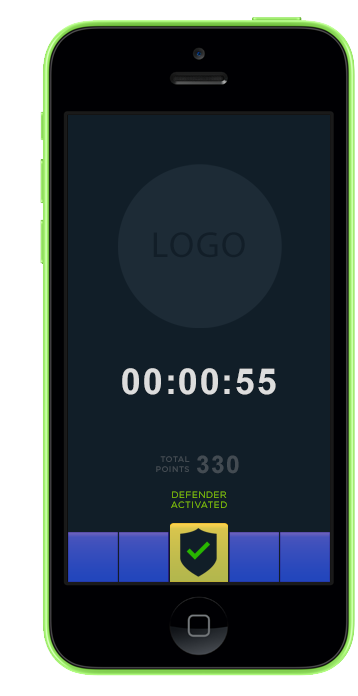
<style>
.page{position:relative;width:358px;height:696px;background:#111e28}
.page>*{position:absolute;margin:0}
.t1{font:36.4px "MyriadPro-Regular";letter-spacing:0.05em;color:#121e28;text-transform:uppercase}
.t2{font:35.6px "Arial-BoldMT";letter-spacing:0.05em;color:#dddddd}
.t3{font:8.2px "GothamHTF-Medium";letter-spacing:0.05em;color:#434b52}
.t4{font:24.6px "Arial-BoldMT";letter-spacing:0.05em;color:#434b52}
.t5{font:9px "GothamHTF-Book";letter-spacing:0.05em;color:#89cd00}
</style>
<div class="page">
<p class="t1" style="left:153px;top:232px;width:92px;height:26px">LOGO</p>
<p class="t2" style="left:122px;top:368px;width:154px;height:27px">00:00:55</p>
<p class="t3" style="left:156px;top:456px;width:34px;height:16px;text-align:right">TOTAL<br>POINTS</p>
<p class="t4" style="left:197px;top:455px;width:42px;height:19px">330</p>
<p class="t5" style="left:171px;top:491px;width:56px;height:17px;text-align:center">DEFENDER<br>ACTIVATED</p>
</div>
